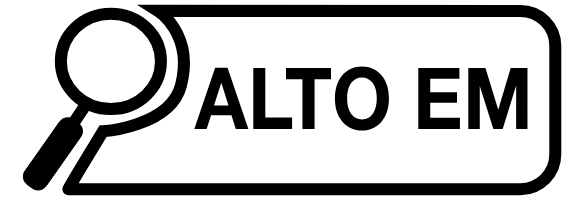
<style>
.page{position:relative;width:573px;height:202px;background:#ffffff}
.page>*{position:absolute;margin:0}
.t1{font:85.8px "HelveticaNeue-Bold";color:#000000;scale:0.9 1}
</style>
<div class="page">
<p class="t1" style="left:194px;top:66px;width:334px;height:65px">ALTO EM</p>
</div>
